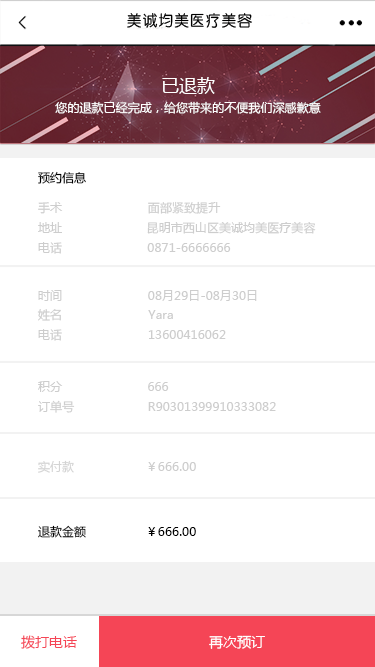
<style>
.page{position:relative;width:375px;height:667px;background:#ffffff}
.page>*{position:absolute;margin:0}
.t1{font:18px "MicrosoftYaHei";letter-spacing:0.005em;color:#ffffff}
.t2{font:12px "MicrosoftYaHei";letter-spacing:0.005em;color:#ffffff}
.t3{font:12px "MicrosoftYaHei";letter-spacing:0.005em;color:#000000}
.t4{font:12px "MicrosoftYaHei";letter-spacing:0.005em;color:#cdcdcd}
.t5{font:12px "MicrosoftYaHei";letter-spacing:0.005em;color:#d4d4d4}
.t6{font:12px "MicrosoftYaHei";letter-spacing:0.005em;color:#010101}
.t7{font:14px "MicrosoftYaHei";letter-spacing:0.005em;color:#f54556}
.t8{font:14px "MicrosoftYaHei";letter-spacing:0.005em;color:#ffffff}
</style>
<div class="page">
<p class="t1" style="left:162px;top:77px;width:53px;height:17px">已退款</p>
<p class="t2" style="left:55px;top:101px;width:266px;height:13px">您的退款已经完成，给您带来的不便我们深感歉意</p>
<p class="t3" style="left:38px;top:171px;width:48px;height:13px">预约信息</p>
<p class="t4" style="left:38px;top:202px;width:25px;height:12px">手术</p>
<p class="t4" style="left:148px;top:201px;width:73px;height:13px">面部紧致提升</p>
<p class="t4" style="left:38px;top:222px;width:24px;height:11px">地址</p>
<p class="t4" style="left:147px;top:222px;width:169px;height:12px">昆明市西山区美诚均美医疗美容</p>
<p class="t4" style="left:38px;top:242px;width:24px;height:12px">电话</p>
<p class="t4" style="left:147px;top:243px;width:84px;height:9px">0871-6666666</p>
<p class="t4" style="left:38px;top:290px;width:24px;height:11px">时间</p>
<p class="t4" style="left:148px;top:290px;width:109px;height:11px">08月29日-08月30日</p>
<p class="t4" style="left:37px;top:309px;width:24px;height:12px">姓名</p>
<p class="t4" style="left:148px;top:310px;width:25px;height:9px">Yara</p>
<p class="t4" style="left:38px;top:329px;width:24px;height:12px">电话</p>
<p class="t4" style="left:148px;top:330px;width:78px;height:9px">13600416062</p>
<p class="t4" style="left:38px;top:381px;width:25px;height:11px">积分</p>
<p class="t4" style="left:148px;top:382px;width:21px;height:9px">666</p>
<p class="t4" style="left:38px;top:400px;width:37px;height:13px">订单号</p>
<p class="t4" style="left:148px;top:402px;width:128px;height:9px">R90301399910333082</p>
<p class="t5" style="left:38px;top:460px;width:36px;height:13px">实付款</p>
<p class="t4" style="left:148px;top:462px;width:48px;height:9px">￥666.00</p>
<p class="t6" style="left:38px;top:525px;width:48px;height:13px">退款金额</p>
<p class="t3" style="left:148px;top:527px;width:48px;height:9px">￥666.00</p>
<p class="t7" style="left:21px;top:635px;width:56px;height:14px">拨打电话</p>
<p class="t8" style="left:209px;top:635px;width:56px;height:14px">再次预订</p>
</div>
